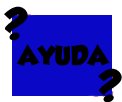
<style>
.page{position:relative;width:122px;height:102px;background:#0b07c6}
.page>*{position:absolute;margin:0}
.t1{font:33.7px "GROBOLD";color:#000000}
.t2{font:24px "GROBOLD";color:#000000}
</style>
<div class="page">
<p class="t1" style="left:4px;top:6px;width:24px;height:35px">?</p>
<p class="t2" style="left:16px;top:44px;width:94px;height:22px">AYUDA</p>
<p class="t1" style="left:98px;top:68px;width:24px;height:35px">?</p>
</div>
